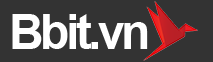
<style>
.page{position:relative;width:213px;height:62px;background:#333333}
.page>*{position:absolute;margin:0}
.t1{font:48px "Arial-BoldMT";letter-spacing:-0.075em;color:#ffffff}
</style>
<div class="page">
<p class="t1" style="left:12px;top:14px;width:136px;height:35px">Bbit.vn</p>
</div>
